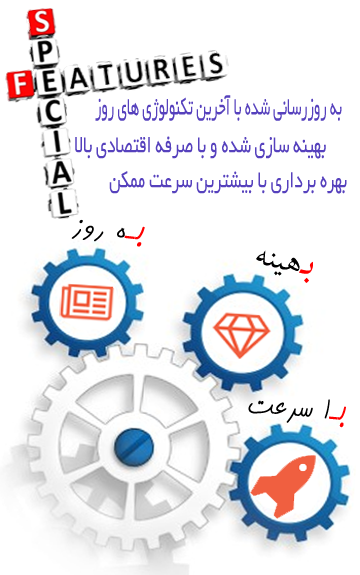
<style>
.page{position:relative;width:360px;height:575px;background:#ffffff}
.page>*{position:absolute;margin:0}
.t1{font:27.7px "BYekan";color:#5641bd;scale:0.54 1}
.t2{font:26.9px "BYekan";color:#5641bd;scale:0.65 1}
.t3{font:26.6px "BYekan";color:#5641bd;scale:0.67 1}
.t4{font:37px "BKamran";color:#000000;font-weight:bold}
.t5{font:50px "BKamran";color:#ff0000;font-weight:bold}
.t6{font:46.3px "TraditionalArabic";color:#000000}
.t7{font:61.5px "TraditionalArabic";color:#ff0000}
.t8{font:40.9px "BKamran";color:#000000;font-weight:bold;scale:0.87 1}
.t9{font:51.8px "BKamran";color:#ff0000;font-weight:bold;scale:0.87 1}
</style>
<div class="page">
<p class="t1" style="left:95px;top:95px;width:247px;height:26px">به روزرسانی شده با آخرین تکنولوژی های روز</p>
<p class="t2" style="left:75px;top:136px;width:251px;height:23px">بهینه سازی شده و با صرفه اقتصادی بالا</p>
<p class="t3" style="left:109px;top:171px;width:238px;height:23px">بهره برداری با بیشترین سرعت ممکن</p>
<p class="t4" style="left:71px;top:219px;width:74px;height:28px;rotate:6deg"><span class="t5">بـ</span>ه روز</p>
<p class="t6" style="left:256px;top:250px;width:57px;height:33px;rotate:14deg"><span class="t7">بـ</span>هینه</p>
<p class="t8" style="left:248px;top:399px;width:98px;height:29px;rotate:5deg"><span class="t9">بـ</span>ا سرعت</p>
</div>
